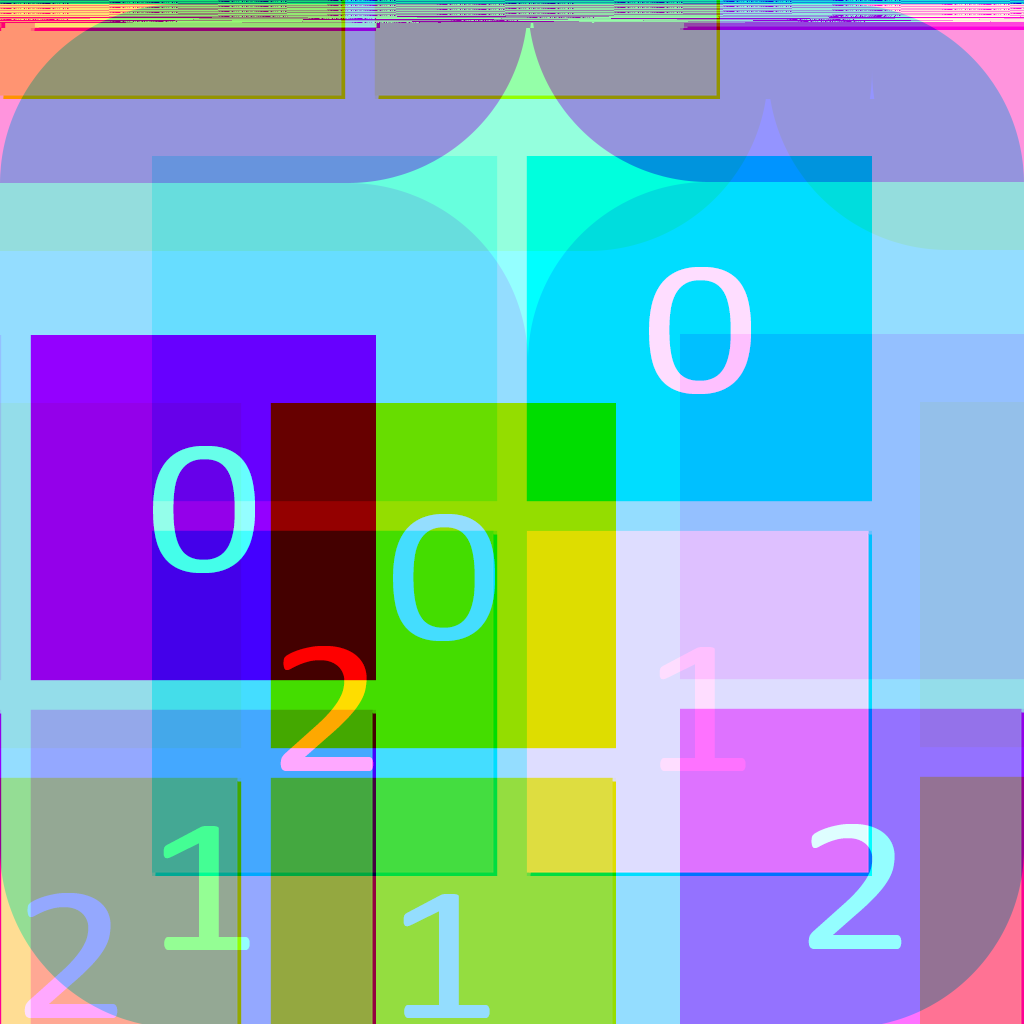
<style>
.page{position:relative;width:1024px;height:1024px}
.page>*{position:absolute;margin:0}
.t1{font:194.5px "Calibri";scale:1.2 1}
</style>
<div class="page">
<p class="t1" style="left:649px;top:263px;width:102px;height:127px">0</p>
<p class="t1" style="left:280px;top:642px;width:94px;height:125px">2</p>
<p class="t1" style="left:659px;top:643px;width:87px;height:124px">1</p>
</div>
